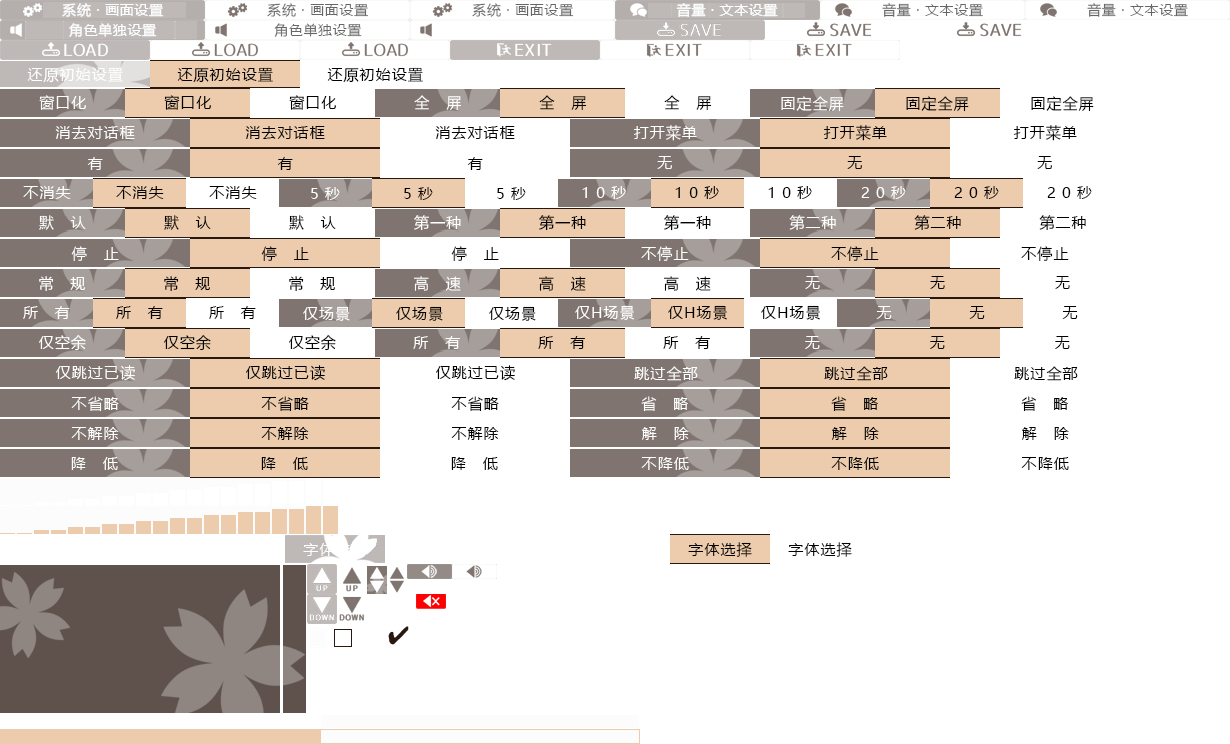
<style>
.page{position:relative;width:1230px;height:744px;background:#ffffff}
.page>*{position:absolute;margin:0}
.t1{font:13.9px "MicrosoftYaHei";letter-spacing:0.05em;color:#fefefe}
.t2{font:13.9px "MicrosoftYaHei";letter-spacing:0.05em;color:#676767}
.t3{font:13.9px "MicrosoftYaHei";letter-spacing:0.05em;color:#ffffff}
.t4{font:13.9px "MicrosoftYaHei";letter-spacing:0.05em;color:#666666}
.t5{font:15.3px "MicrosoftYaHei";letter-spacing:0.05em;color:#ffffff}
.t6{font:15.3px "MicrosoftYaHei";letter-spacing:0.05em;color:#000000}
</style>
<div class="page">
<p class="t1" style="left:62px;top:3px;width:102px;height:14px">系统 · 画面设置</p>
<p class="t2" style="left:267px;top:3px;width:102px;height:14px">系统 · 画面设置</p>
<p class="t2" style="left:472px;top:3px;width:102px;height:14px">系统 · 画面设置</p>
<p class="t3" style="left:676px;top:3px;width:102px;height:14px">音量 · 文本设置</p>
<p class="t4" style="left:882px;top:3px;width:101px;height:14px">音量 · 文本设置</p>
<p class="t4" style="left:1087px;top:3px;width:101px;height:14px">音量 · 文本设置</p>
<p class="t1" style="left:69px;top:23px;width:88px;height:14px">角色单独设置</p>
<p class="t2" style="left:274px;top:23px;width:88px;height:14px">角色单独设置</p>
<p class="t5" style="left:27px;top:67px;width:96px;height:16px">还原初始设置</p>
<p class="t6" style="left:177px;top:67px;width:96px;height:16px">还原初始设置</p>
<p class="t6" style="left:327px;top:67px;width:96px;height:16px">还原初始设置</p>
<p class="t5" style="left:39px;top:95px;width:47px;height:15px">窗口化</p>
<p class="t6" style="left:164px;top:95px;width:47px;height:15px">窗口化</p>
<p class="t6" style="left:289px;top:95px;width:47px;height:15px">窗口化</p>
<p class="t5" style="left:414px;top:95px;width:48px;height:15px">全   屏</p>
<p class="t6" style="left:539px;top:95px;width:48px;height:15px">全   屏</p>
<p class="t6" style="left:664px;top:95px;width:48px;height:15px">全   屏</p>
<p class="t5" style="left:781px;top:96px;width:63px;height:16px">固定全屏</p>
<p class="t6" style="left:906px;top:96px;width:63px;height:16px">固定全屏</p>
<p class="t6" style="left:1031px;top:96px;width:63px;height:16px">固定全屏</p>
<p class="t5" style="left:55px;top:126px;width:80px;height:13px">消去对话框</p>
<p class="t6" style="left:245px;top:126px;width:80px;height:13px">消去对话框</p>
<p class="t6" style="left:435px;top:126px;width:80px;height:13px">消去对话框</p>
<p class="t5" style="left:634px;top:125px;width:63px;height:16px">打开菜单</p>
<p class="t6" style="left:824px;top:125px;width:63px;height:16px">打开菜单</p>
<p class="t6" style="left:1014px;top:125px;width:63px;height:16px">打开菜单</p>
<p class="t5" style="left:87px;top:157px;width:16px;height:13px">有</p>
<p class="t6" style="left:277px;top:157px;width:16px;height:13px">有</p>
<p class="t6" style="left:467px;top:157px;width:16px;height:13px">有</p>
<p class="t5" style="left:657px;top:156px;width:15px;height:13px">无</p>
<p class="t6" style="left:847px;top:156px;width:15px;height:13px">无</p>
<p class="t6" style="left:1037px;top:156px;width:15px;height:13px">无</p>
<p class="t5" style="left:23px;top:186px;width:48px;height:13px">不消失</p>
<p class="t6" style="left:116px;top:186px;width:48px;height:13px">不消失</p>
<p class="t6" style="left:209px;top:186px;width:48px;height:13px">不消失</p>
<p class="t5" style="left:311px;top:187px;width:29px;height:13px">5 秒</p>
<p class="t6" style="left:404px;top:187px;width:29px;height:13px">5 秒</p>
<p class="t6" style="left:497px;top:187px;width:29px;height:13px">5 秒</p>
<p class="t5" style="left:582px;top:186px;width:44px;height:13px">1 0 秒</p>
<p class="t6" style="left:675px;top:186px;width:44px;height:13px">1 0 秒</p>
<p class="t6" style="left:768px;top:186px;width:44px;height:13px">1 0 秒</p>
<p class="t5" style="left:861px;top:186px;width:45px;height:13px">2 0 秒</p>
<p class="t6" style="left:954px;top:186px;width:45px;height:13px">2 0 秒</p>
<p class="t6" style="left:1047px;top:186px;width:45px;height:13px">2 0 秒</p>
<p class="t5" style="left:39px;top:215px;width:47px;height:15px">默   认</p>
<p class="t6" style="left:164px;top:215px;width:47px;height:15px">默   认</p>
<p class="t6" style="left:289px;top:215px;width:47px;height:15px">默   认</p>
<p class="t5" style="left:414px;top:215px;width:47px;height:16px">第一种</p>
<p class="t6" style="left:539px;top:215px;width:47px;height:16px">第一种</p>
<p class="t6" style="left:664px;top:215px;width:47px;height:16px">第一种</p>
<p class="t5" style="left:789px;top:215px;width:47px;height:15px">第二种</p>
<p class="t6" style="left:914px;top:215px;width:47px;height:15px">第二种</p>
<p class="t6" style="left:1039px;top:215px;width:47px;height:15px">第二种</p>
<p class="t5" style="left:71px;top:246px;width:48px;height:15px">停   止</p>
<p class="t6" style="left:261px;top:246px;width:48px;height:15px">停   止</p>
<p class="t6" style="left:451px;top:246px;width:48px;height:15px">停   止</p>
<p class="t5" style="left:641px;top:246px;width:48px;height:15px">不停止</p>
<p class="t6" style="left:831px;top:246px;width:48px;height:15px">不停止</p>
<p class="t6" style="left:1021px;top:246px;width:48px;height:15px">不停止</p>
<p class="t5" style="left:39px;top:276px;width:46px;height:15px">常   规</p>
<p class="t6" style="left:164px;top:276px;width:46px;height:15px">常   规</p>
<p class="t6" style="left:289px;top:276px;width:46px;height:15px">常   规</p>
<p class="t5" style="left:414px;top:276px;width:47px;height:15px">高   速</p>
<p class="t6" style="left:539px;top:276px;width:47px;height:15px">高   速</p>
<p class="t6" style="left:664px;top:276px;width:47px;height:15px">高   速</p>
<p class="t5" style="left:805px;top:276px;width:15px;height:13px">无</p>
<p class="t6" style="left:930px;top:276px;width:15px;height:13px">无</p>
<p class="t6" style="left:1055px;top:276px;width:15px;height:13px">无</p>
<p class="t5" style="left:575px;top:305px;width:59px;height:15px">仅H场景</p>
<p class="t6" style="left:668px;top:305px;width:59px;height:15px">仅H场景</p>
<p class="t6" style="left:761px;top:305px;width:59px;height:15px">仅H场景</p>
<p class="t5" style="left:23px;top:306px;width:47px;height:13px">所   有</p>
<p class="t6" style="left:116px;top:306px;width:47px;height:13px">所   有</p>
<p class="t6" style="left:209px;top:306px;width:47px;height:13px">所   有</p>
<p class="t5" style="left:303px;top:306px;width:47px;height:15px">仅场景</p>
<p class="t6" style="left:396px;top:306px;width:47px;height:15px">仅场景</p>
<p class="t6" style="left:489px;top:306px;width:47px;height:15px">仅场景</p>
<p class="t5" style="left:876px;top:306px;width:16px;height:13px">无</p>
<p class="t6" style="left:969px;top:306px;width:16px;height:13px">无</p>
<p class="t6" style="left:1062px;top:306px;width:16px;height:13px">无</p>
<p class="t5" style="left:39px;top:335px;width:47px;height:16px">仅空余</p>
<p class="t6" style="left:164px;top:335px;width:47px;height:16px">仅空余</p>
<p class="t6" style="left:289px;top:335px;width:47px;height:16px">仅空余</p>
<p class="t5" style="left:413px;top:336px;width:47px;height:13px">所   有</p>
<p class="t6" style="left:538px;top:336px;width:47px;height:13px">所   有</p>
<p class="t6" style="left:663px;top:336px;width:47px;height:13px">所   有</p>
<p class="t5" style="left:805px;top:336px;width:15px;height:13px">无</p>
<p class="t6" style="left:930px;top:336px;width:15px;height:13px">无</p>
<p class="t6" style="left:1055px;top:336px;width:15px;height:13px">无</p>
<p class="t5" style="left:56px;top:365px;width:79px;height:16px">仅跳过已读</p>
<p class="t6" style="left:246px;top:365px;width:79px;height:16px">仅跳过已读</p>
<p class="t6" style="left:436px;top:365px;width:79px;height:16px">仅跳过已读</p>
<p class="t5" style="left:634px;top:366px;width:64px;height:15px">跳过全部</p>
<p class="t6" style="left:824px;top:366px;width:64px;height:15px">跳过全部</p>
<p class="t6" style="left:1014px;top:366px;width:64px;height:15px">跳过全部</p>
<p class="t5" style="left:71px;top:396px;width:48px;height:16px">不省略</p>
<p class="t6" style="left:261px;top:396px;width:48px;height:16px">不省略</p>
<p class="t6" style="left:451px;top:396px;width:48px;height:16px">不省略</p>
<p class="t5" style="left:641px;top:396px;width:47px;height:16px">省   略</p>
<p class="t6" style="left:831px;top:396px;width:47px;height:16px">省   略</p>
<p class="t6" style="left:1021px;top:396px;width:47px;height:16px">省   略</p>
<p class="t5" style="left:71px;top:427px;width:48px;height:13px">不解除</p>
<p class="t6" style="left:261px;top:427px;width:48px;height:13px">不解除</p>
<p class="t6" style="left:451px;top:427px;width:48px;height:13px">不解除</p>
<p class="t5" style="left:642px;top:427px;width:47px;height:13px">解   除</p>
<p class="t6" style="left:832px;top:427px;width:47px;height:13px">解   除</p>
<p class="t6" style="left:1022px;top:427px;width:47px;height:13px">解   除</p>
<p class="t5" style="left:71px;top:457px;width:47px;height:13px">降   低</p>
<p class="t6" style="left:261px;top:457px;width:47px;height:13px">降   低</p>
<p class="t6" style="left:451px;top:457px;width:47px;height:13px">降   低</p>
<p class="t5" style="left:641px;top:457px;width:48px;height:13px">不降低</p>
<p class="t6" style="left:831px;top:457px;width:48px;height:13px">不降低</p>
<p class="t6" style="left:1021px;top:457px;width:48px;height:13px">不降低</p>
<p class="t5" style="left:303px;top:542px;width:64px;height:15px">字体选择</p>
<p class="t6" style="left:688px;top:542px;width:64px;height:15px">字体选择</p>
<p class="t6" style="left:788px;top:542px;width:64px;height:15px">字体选择</p>
</div>
